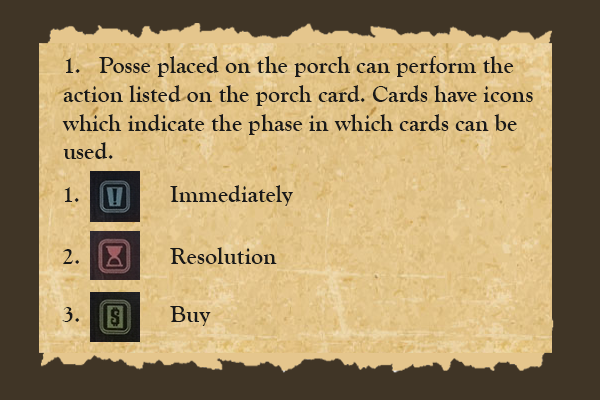
<style>
.page{position:relative;width:600px;height:400px;background:#403526}
.page>*{position:absolute;margin:0}
.t1{font:24px "GoudyOldStyleT-Bold";color:#191919}
.t2{font:23.9px "GoudyOldStyleT-Bold";color:#191919}
</style>
<div class="page">
<p class="t1" style="left:62px;top:56px;width:471px;height:103px">1. Posse placed on the porch can perform the action listed on the porch card. Cards have icons which indicate the phase in which cards can be used.</p>
<p class="t2" style="left:64px;top:185px;width:229px;height:21px">1.    Immediately</p>
<p class="t2" style="left:63px;top:247px;width:214px;height:17px">2.    Resolution</p>
<p class="t1" style="left:62px;top:306px;width:149px;height:20px">3.    Buy</p>
</div>
